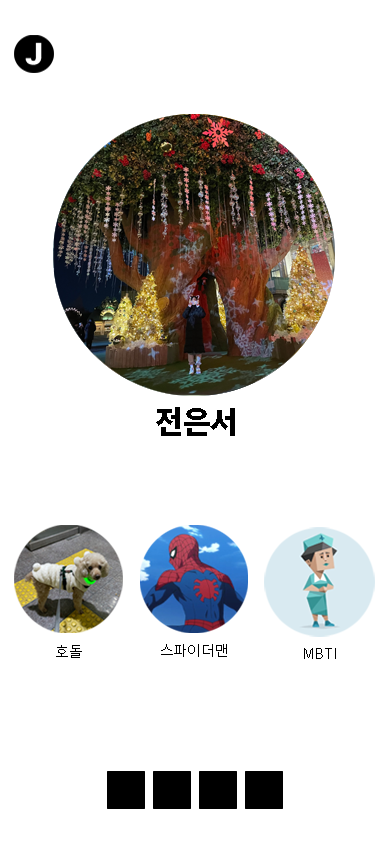
<style>
.page{position:relative;width:390px;height:844px;background:#ffffff}
.page>*{position:absolute;margin:0}
.t1{font:30px "NotoSansKR-Black";color:#000000}
.t2{font:15px "NotoSansKR-Regular";color:#000000}
</style>
<div class="page">
<p class="t1" style="left:156px;top:407px;width:79px;height:29px">전은서</p>
<p class="t2" style="left:56px;top:645px;width:26px;height:13px">호돌</p>
<p class="t2" style="left:161px;top:644px;width:66px;height:13px">스파이더맨</p>
<p class="t2" style="left:304px;top:648px;width:32px;height:11px">MBTI</p>
</div>
